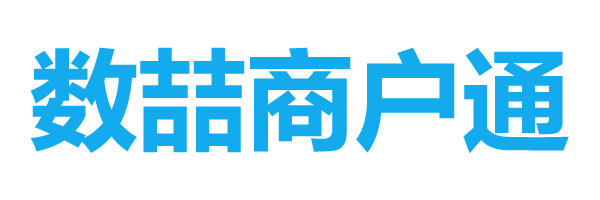
<style>
.page{position:relative;width:600px;height:200px;background:#ffffff}
.page>*{position:absolute;margin:0}
.t1{font:108px "MicrosoftYaHei-Bold";color:#13aaee}
</style>
<div class="page">
<p class="t1" style="left:30px;top:47px;width:539px;height:106px">数喆商户通</p>
</div>
